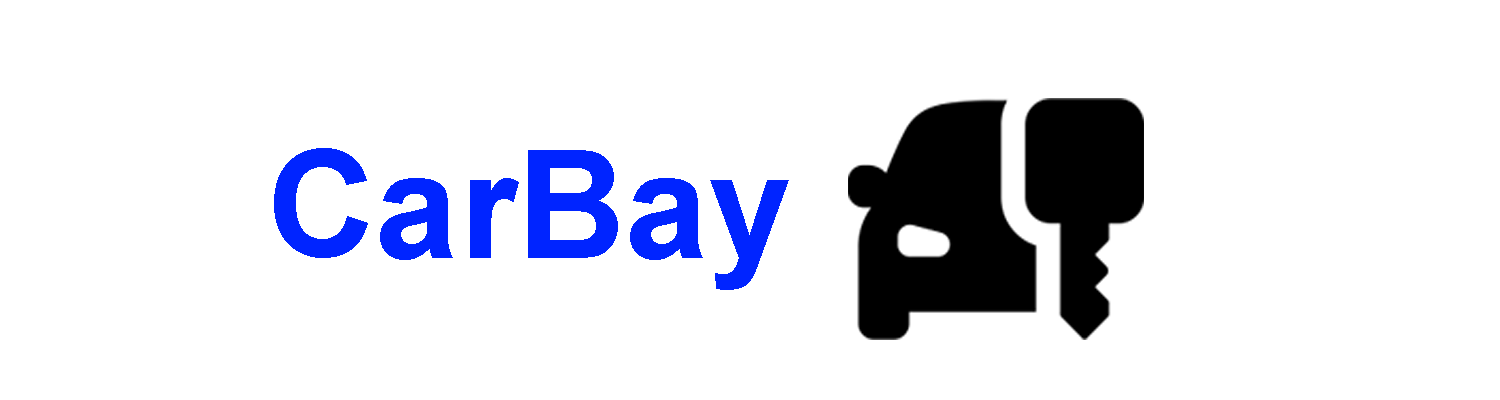
<style>
.page{position:relative;width:1500px;height:400px;background:#ffffff}
.page>*{position:absolute;margin:0}
.t1{font:150px "Arial-BoldMT";color:#0024ff}
</style>
<div class="page">
<p class="t1" style="left:274px;top:148px;width:515px;height:142px">CarBay</p>
</div>
